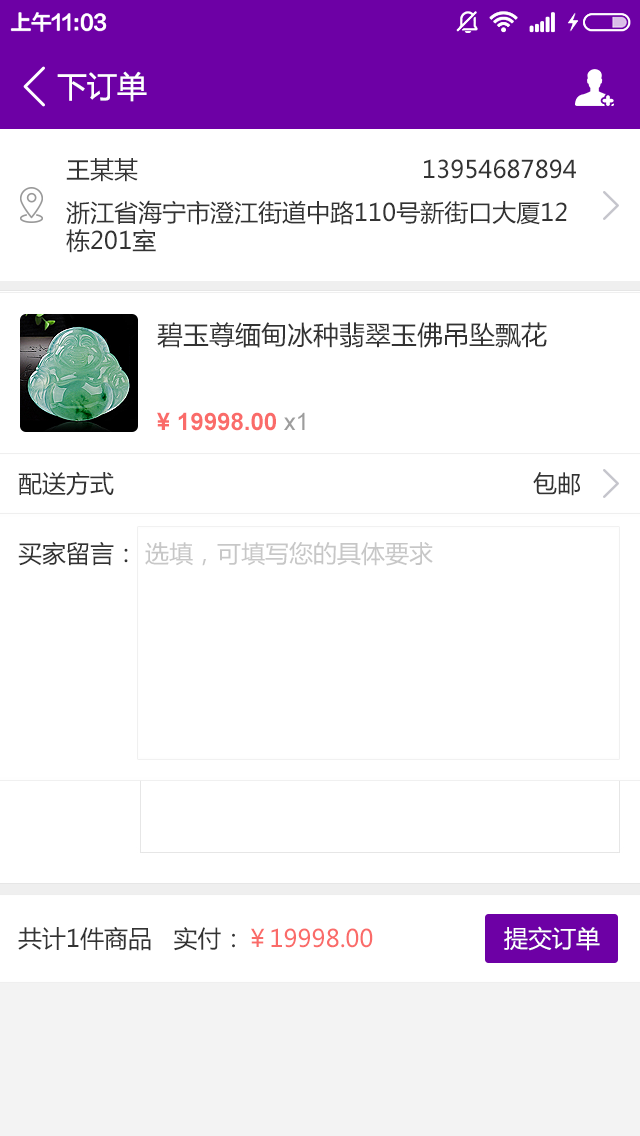
<style>
.page{position:relative;width:640px;height:1136px;background:#ffffff}
.page>*{position:absolute;margin:0}
.t1{font:30px "MicrosoftYaHei";color:#ffffff}
.t2{font:24px/43px "MicrosoftYaHei";color:#333333}
.t3{font:24px/28px "MicrosoftYaHei";color:#333333}
.t4{font:26px/43px "MicrosoftYaHei";color:#333333}
.t5{font:24px/43px "Arial-BoldMT";color:#fa6b69}
.t6{font:24px/43px "ArialMT";color:#9d9d9d}
.t7{font:24px "MicrosoftYaHei";color:#333333}
.t8{font:24px "MicrosoftYaHei";color:#c7c7c7}
.t9{font:24px "MicrosoftYaHei";color:#fa6b69}
.t10{font:24px "MicrosoftYaHei";color:#ffffff}
</style>
<div class="page">
<p class="t1" style="left:57px;top:71px;width:90px;height:31px">下订单</p>
<p class="t2" style="left:66px;top:158px;width:510px;height:95px">王某某                                        13954687894<br>浙<span class="t3">江省海宁市澄江街道中路110号新街口大厦12<br>栋201室</span></p>
<p class="t4" style="left:157px;top:322px;width:390px;height:109px">碧玉尊缅甸冰种翡翠玉佛吊坠飘花<br><br><span class="t5">¥ 19998.00</span><span class="t6"> x1</span></p>
<p class="t7" style="left:18px;top:471px;width:562px;height:25px">配送方式                                                           包邮</p>
<p class="t7" style="left:18px;top:541px;width:110px;height:25px">买家留言：</p>
<p class="t8" style="left:145px;top:541px;width:288px;height:25px">选填，可填写您的具体要求</p>
<p class="t7" style="left:18px;top:926px;width:355px;height:25px">共计1件商品   实付：<span class="t9">￥19998.00</span></p>
<p class="t10" style="left:504px;top:926px;width:96px;height:25px">提交订单</p>
</div>
